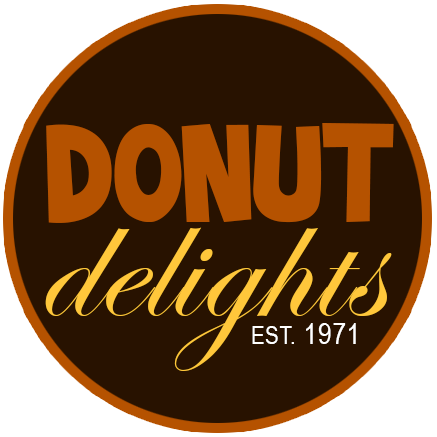
<style>
.page{position:relative;width:437px;height:437px;background:#281200}
.page>*{position:absolute;margin:0}
.t1{font:125px "Toonish";letter-spacing:0.02em;color:#b55200}
.t2{font:173px "EdwardianScriptITC";letter-spacing:0.055em;color:#ffc73b}
.t3{font:25px "ArialNarrow";letter-spacing:0.02em;color:#ffffff}
.t4{font:30px "ArialNarrow";letter-spacing:0.02em;color:#ffffff}
</style>
<div class="page">
<p class="t1" style="left:46px;top:123px;width:348px;height:100px">DONUT</p>
<p class="t2" style="left:45px;top:227px;width:347px;height:144px">delights</p>
<p class="t3" style="left:252px;top:323px;width:104px;height:21px">EST.<span class="t4"> 1971</span></p>
</div>
